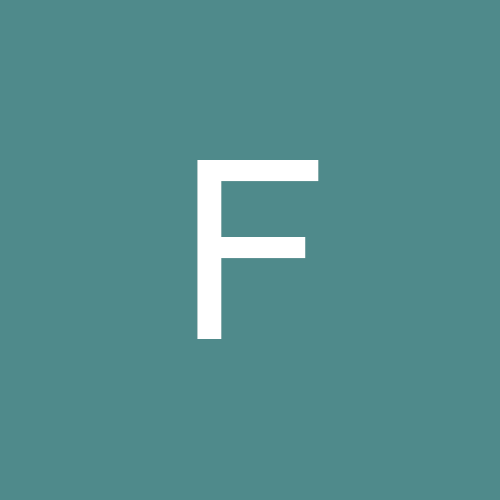
<style>
.page{position:relative;width:500px;height:500px;background:#4f8a8b}
.page>*{position:absolute;margin:0}
.t1{font:250px "ArialMT";color:#ffffff}
</style>
<div class="page">
<p class="t1" style="left:197px;top:160px;width:122px;height:179px">F</p>
</div>
